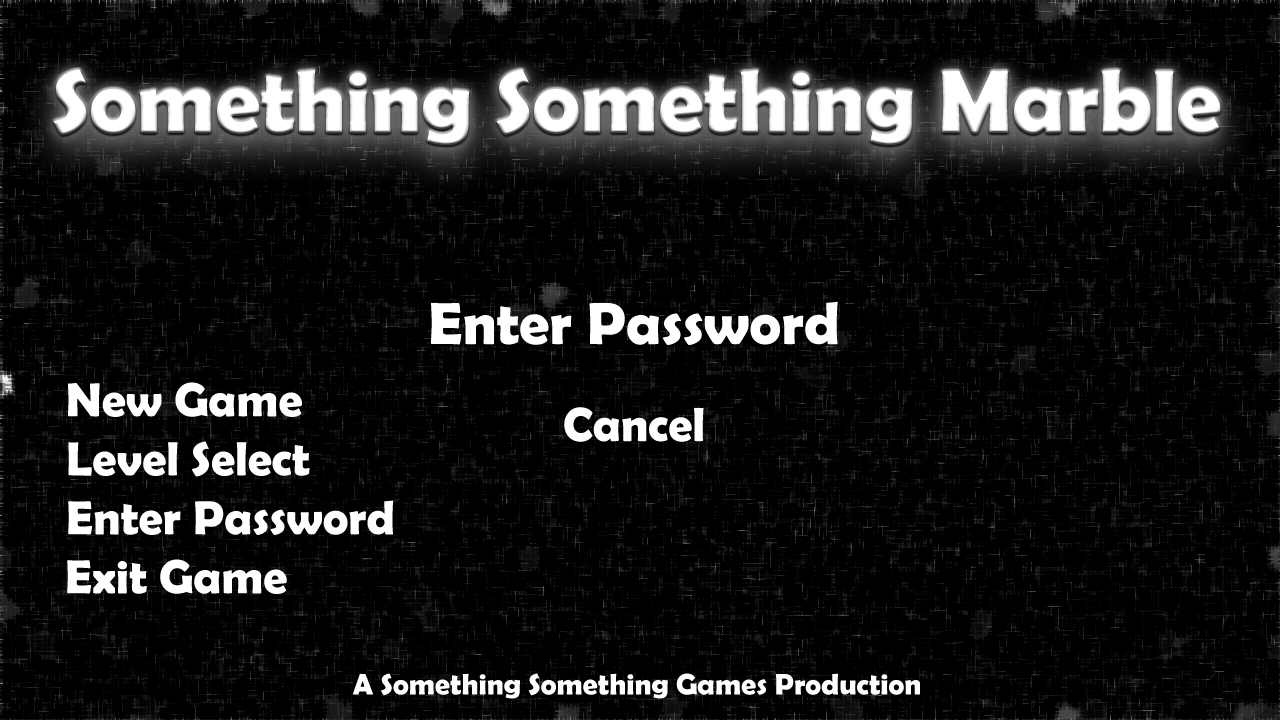
<style>
.page{position:relative;width:1280px;height:720px;background:#000000}
.page>*{position:absolute;margin:0}
.t1{font:90px "BerlinSansFBDemi-Bold";color:#ffffff}
.t2{font:60px "BerlinSansFBDemi-Bold";color:#ffffff}
.t3{font:48px "BerlinSansFBDemi-Bold";color:#ffffff}
.t4{font:30px "BerlinSansFBDemi-Bold";color:#ffffff}
</style>
<div class="page">
<p class="t1" style="left:54px;top:69px;width:1167px;height:77px">Something Something Marble</p>
<p class="t2" style="left:431px;top:301px;width:407px;height:44px">Enter Password</p>
<p class="t3" style="left:68px;top:382px;width:234px;height:35px">New Game</p>
<p class="t3" style="left:564px;top:407px;width:140px;height:35px">Cancel</p>
<p class="t3" style="left:68px;top:441px;width:242px;height:36px">Level Select</p>
<p class="t3" style="left:68px;top:500px;width:326px;height:35px">Enter Password</p>
<p class="t3" style="left:67px;top:559px;width:220px;height:35px">Exit Game</p>
<p class="t4" style="left:352px;top:673px;width:568px;height:26px">A Something Something Games Production</p>
</div>
